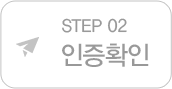
<style>
.page{position:relative;width:172px;height:89px;background:#ffffff}
.page>*{position:absolute;margin:0}
.t1{font:18px "YDVYGO33";color:#999999;scale:0.95 1}
.t2{font:26px "YDVYGO33";letter-spacing:-0.025em;color:#999999;scale:0.95 1}
</style>
<div class="page">
<p class="t1" style="left:62px;top:18px;width:65px;height:15px">STEP 02</p>
<p class="t2" style="left:62px;top:43px;width:87px;height:24px">인증확인</p>
</div>
